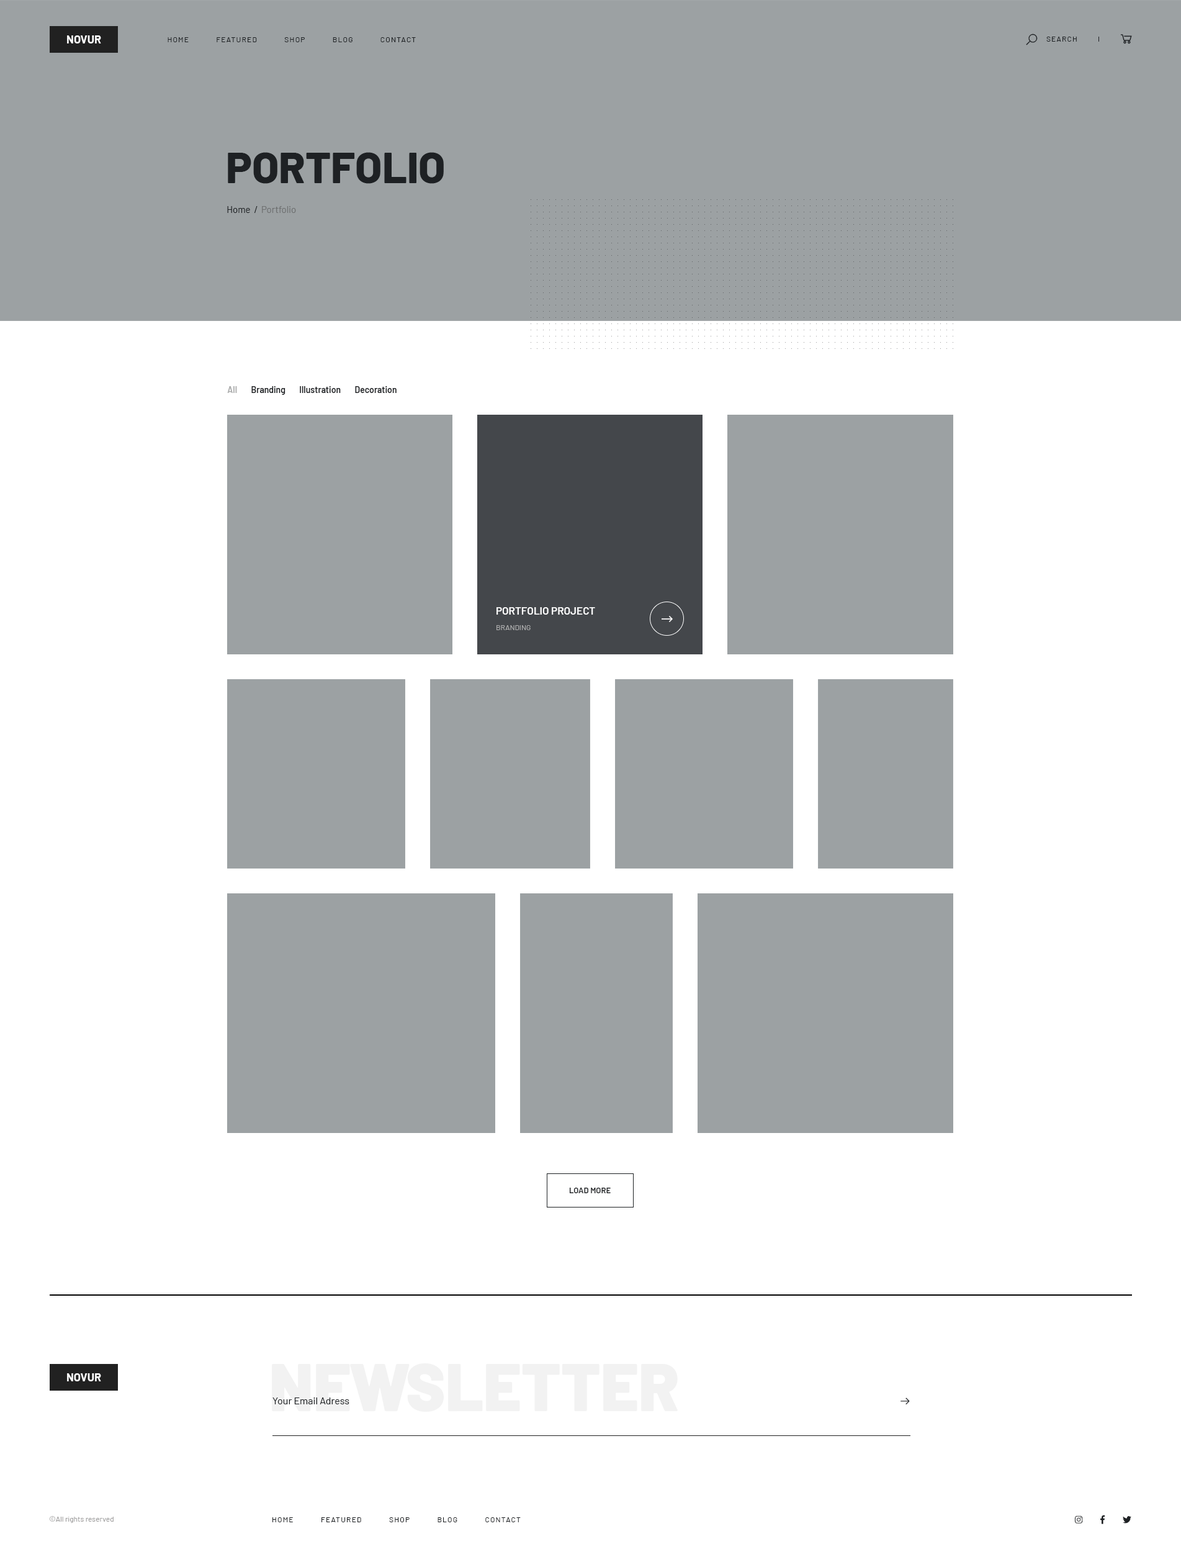
<style>
.page{position:relative;width:1181px;height:1562px;background:#ffffff}
.page>*{position:absolute;margin:0}
.t1{font:11.2px "Barlow-Bold";color:#fefefe;text-transform:uppercase}
.t2{font:7.4px "Barlow-Regular";letter-spacing:0.1em;color:#1e2124;text-transform:uppercase}
.t3{font:43.4px "Barlow-ExtraBold";color:#1e2124;text-transform:uppercase}
.t4{font:9.3px "Barlow-Regular";color:#6e7071}
.t5{font:9.3px "Barlow-Regular";color:#1e2124}
.t6{font:8.7px "Barlow-SemiBold";color:#1e2124}
.t7{font:8.7px "Barlow-SemiBold";color:#aaabab}
.t8{font:10.6px "Barlow-SemiBold";color:#ffffff;text-transform:uppercase}
.t9{font:7.4px "Barlow-Regular";color:#aeaeae;text-transform:uppercase}
.t10{font:8.1px "Barlow-SemiBold";color:#1e2124;text-transform:uppercase}
.t11{font:66.4px "Barlow-Black";color:#f2f2f2}
.t12{font:9.9px "Barlow-Regular";color:#1e2124}
.t13{font:7.4px "Barlow-Regular";color:#9e9d9d}
</style>
<div class="page">
<p class="t1" style="left:67px;top:35px;width:34px;height:8px">novur</p>
<p class="t2" style="left:168px;top:37px;width:248px;height:5px">Home            Featured            Shop            Blog            Contact</p>
<p class="t2" style="left:1046px;top:37px;width:31px;height:5px">Search</p>
<p class="t3" style="left:228px;top:152px;width:216px;height:32px">Portfolio</p>
<p class="t4" style="left:227px;top:206px;width:69px;height:7px"><span class="t5">Home  /</span>  Portfolio</p>
<p class="t6" style="left:227px;top:386px;width:170px;height:9px"><span class="t7">All</span>        Branding        Illustration        Decoration</p>
<p class="t8" style="left:497px;top:607px;width:98px;height:7px">Portfolio Project</p>
<p class="t9" style="left:497px;top:625px;width:34px;height:5px">Branding</p>
<p class="t10" style="left:569px;top:1187px;width:42px;height:6px">Load More</p>
<p class="t1" style="left:67px;top:1373px;width:34px;height:8px">Novur</p>
<p class="t11" style="left:272px;top:1363px;width:406px;height:48px">NEWSLETTER</p>
<p class="t12" style="left:272px;top:1397px;width:77px;height:7px">Your Email Adress</p>
<p class="t13" style="left:50px;top:1516px;width:64px;height:7px">©All rights reserved</p>
<p class="t2" style="left:272px;top:1517px;width:249px;height:5px">Home            Featured            Shop            Blog            Contact</p>
</div>
